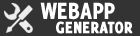
<style>
.page{position:relative;width:140px;height:36px;background:#333333}
.page>*{position:absolute;margin:0}
.t1{font:26px "Delicious-Heavy";color:#ffffff;scale:0.91 1}
.t2{font:18px "Delicious-Heavy";color:#ffffff;text-transform:uppercase;font-weight:bold;scale:0.91 1}
</style>
<div class="page">
<p class="t1" style="left:40px;top:2px;width:75px;height:18px">WEBAPP</p>
<p class="t2" style="left:56px;top:21px;width:77px;height:13px">Generator</p>
</div>
